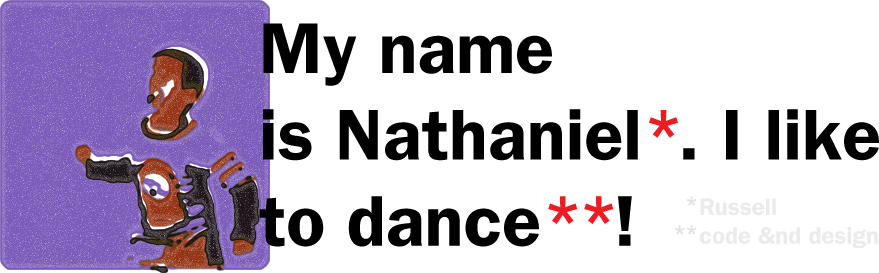
<style>
.page{position:relative;width:879px;height:273px;background:#ffffff}
.page>*{position:absolute;margin:0}
.t1{font:72px "ITCFranklinGothicStd-Demi";color:#000000}
.t2{font:72px "ITCFranklinGothicStd-Demi";color:#ed1c24}
.t3{font:72px "ITCFranklinGothicStd-Demi";letter-spacing:-0.1em;color:#ed1c24}
.t4{font:24px "ITCFranklinGothicStd-Demi";letter-spacing:-0.1em;color:#e1e1e1}
.t5{font:24px "ITCFranklinGothicStd-Demi";color:#e1e1e1}
.t6{font:24px "ITCFranklinGothicStd-Demi";color:#ebebeb}
</style>
<div class="page">
<p class="t1" style="left:259px;top:23px;width:620px;height:224px">My name<br>is Nathaniel<span class="t2">*</span>. I like<br>to dance<span class="t3">**</span>!</p>
<p class="t4" style="left:674px;top:196px;width:23px;height:39px;text-align:right"><span class="t5">*<br></span>**</p>
<p class="t6" style="left:699px;top:198px;width:179px;height:50px">Russell<br>code &amp;nd design</p>
</div>
